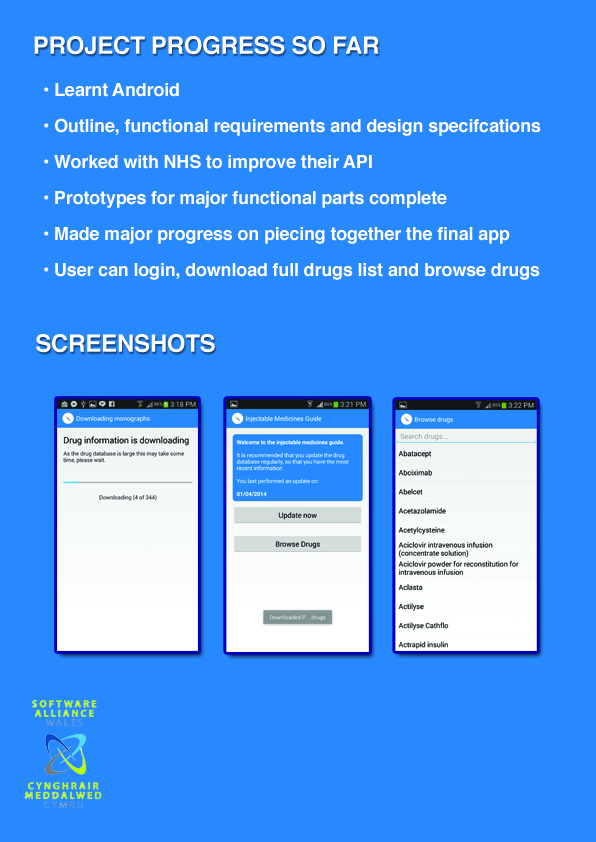
<style>
.page{position:relative;width:596px;height:842px;background:#2889ff}
.page>*{position:absolute;margin:0}
.t1{font:24px "Helvetica-Bold";letter-spacing:-0.01em;color:#ffffff}
.t2{font:18px/36px "Helvetica-Bold";letter-spacing:-0.01em;color:#ffffff}
</style>
<div class="page">
<p class="t1" style="left:34px;top:36px;width:345px;height:19px">PROJECT PROGRESS SO FAR</p>
<p class="t2" style="left:44px;top:83px;width:497px;height:197px">• Learnt Android<br>• Outline, functional requirements and design specifcations<br>• Worked with NHS to improve their API<br>• Prototypes for major functional parts complete<br>• Made major progress on piecing together the final app<br>• User can login, download full drugs list and browse drugs</p>
<p class="t1" style="left:36px;top:334px;width:179px;height:19px">SCREENSHOTS</p>
</div>
